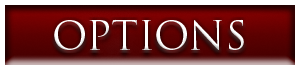
<style>
.page{position:relative;width:300px;height:70px;background:#ffffff}
.page>*{position:absolute;margin:0}
.t1{font:38.9px "TrajanPro-Regular";color:#ffffff}
</style>
<div class="page">
<p class="t1" style="left:54px;top:19px;width:190px;height:31px">OPTIONS</p>
</div>
